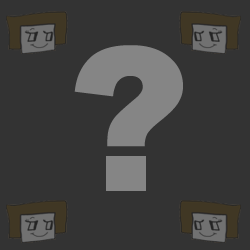
<style>
.page{position:relative;width:250px;height:250px;background:#333333}
.page>*{position:absolute;margin:0}
.t1{font:200px "Arial-Black";color:#858585}
</style>
<div class="page">
<p class="t1" style="left:74px;top:45px;width:109px;height:146px">?</p>
</div>
